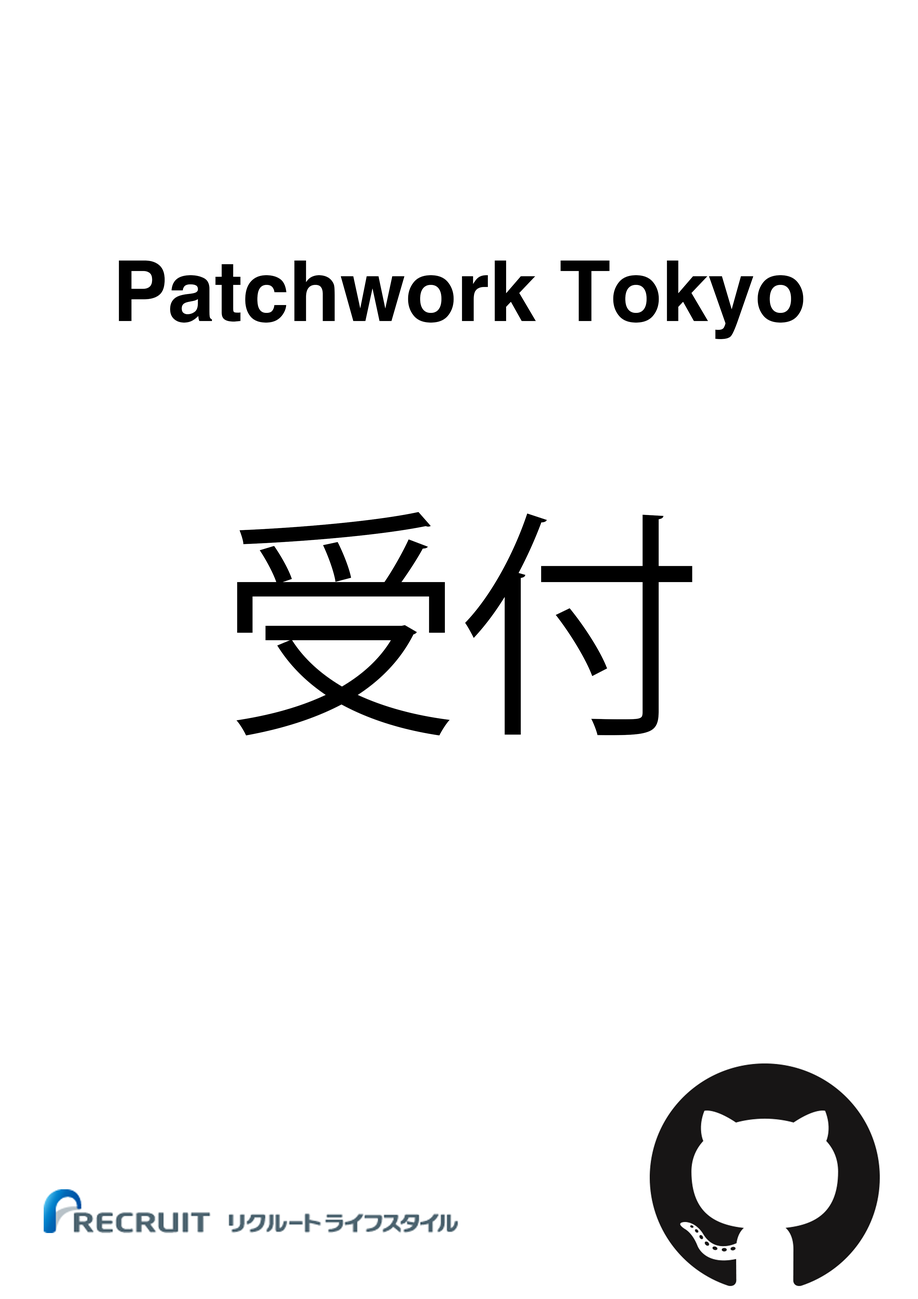
<style>
.page{position:relative;width:918px;height:1299px;background:#ffffff}
.page>*{position:absolute;margin:0}
.t1{font:83.9px "Helvetica-Bold";color:#000000}
.t2{font:239.8px "KozGoPr6N-Regular";color:#000000}
</style>
<div class="page">
<p class="t1" style="left:119px;top:260px;width:685px;height:79px">Patchwork Tokyo</p>
<p class="t2" style="left:236px;top:512px;width:457px;height:223px">受付</p>
</div>
